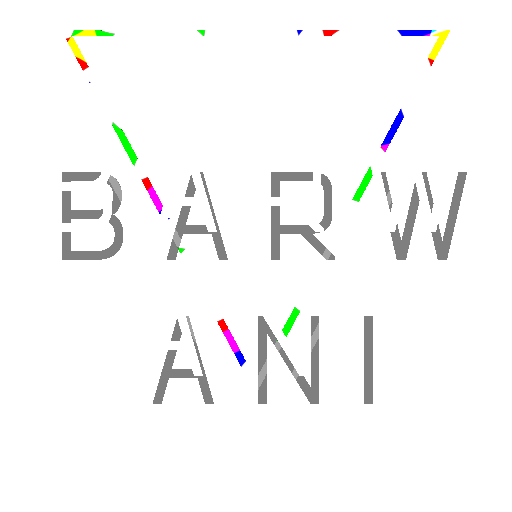
<style>
.page{position:relative;width:512px;height:512px;background:#ffffff}
.page>*{position:absolute;margin:0}
.t1{font:120px "NotJustGroovy";letter-spacing:0.3em;color:#7f7f7f}
</style>
<div class="page">
<p class="t1" style="left:62px;top:172px;width:405px;height:232px;text-align:center">BARW<br>ANI</p>
</div>
